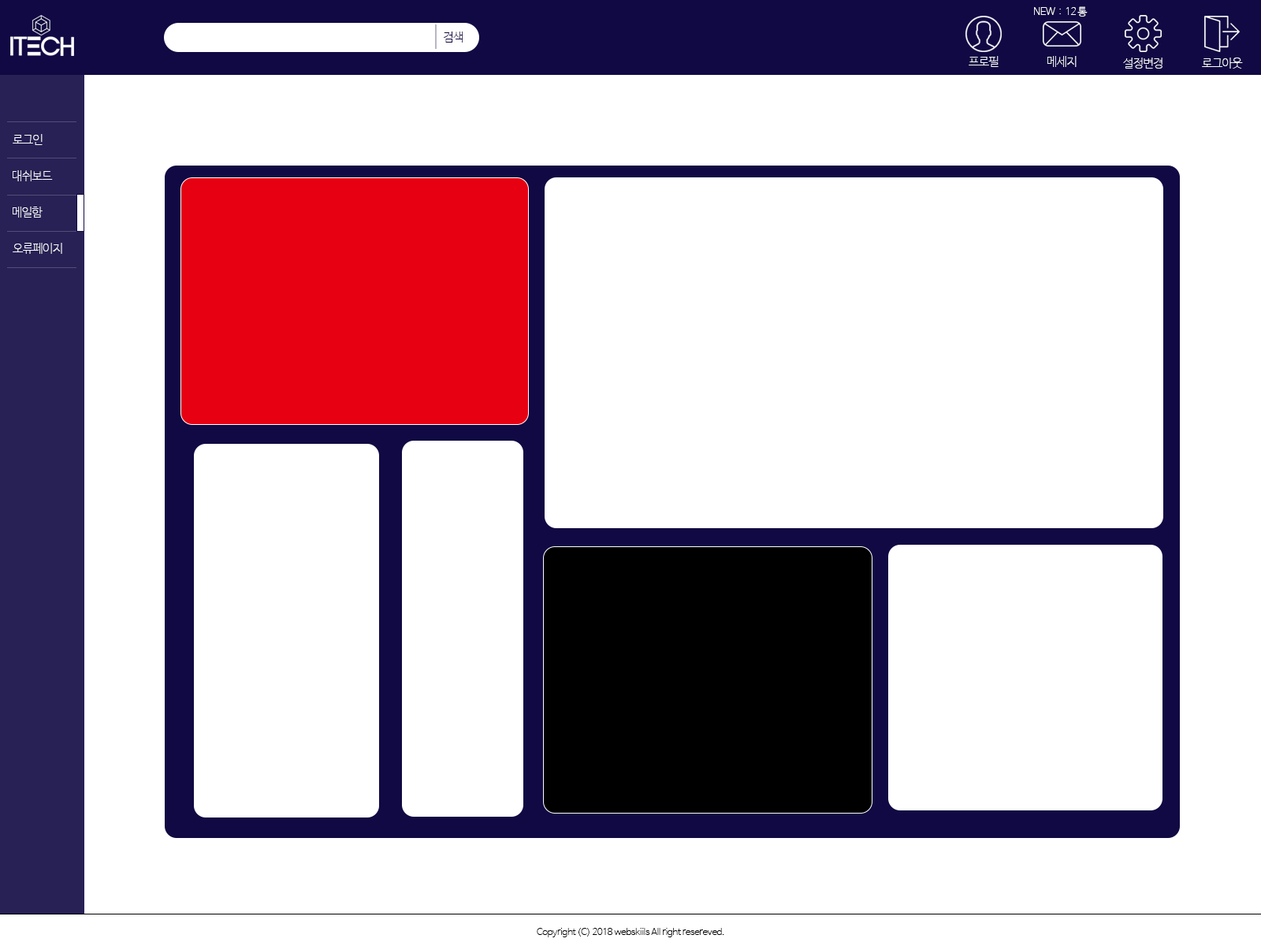
<style>
.page{position:relative;width:1261px;height:946px;background:#ffffff}
.page>*{position:absolute;margin:0}
.t1{font:10.2px "NanumBarunGothicUltraLight";letter-spacing:-0.045em;color:#ffffff}
.t2{font:11.8px "NanumBarunGothicUltraLight";letter-spacing:-0.045em;color:#100943}
.t3{font:11.8px "NanumBarunGothicUltraLight";letter-spacing:-0.045em;color:#ffffff}
.t4{font:9.5px "NanumBarunGothicUltraLight";letter-spacing:-0.045em;color:#000000}
</style>
<div class="page">
<p class="t1" style="left:1034px;top:6px;width:54px;height:11px">NEW  :  12 통</p>
<p class="t2" style="left:444px;top:32px;width:19px;height:11px">검색</p>
<p class="t3" style="left:969px;top:56px;width:29px;height:11px">프로필</p>
<p class="t3" style="left:1047px;top:56px;width:30px;height:11px">메세지</p>
<p class="t3" style="left:1123px;top:58px;width:39px;height:11px">설정변경</p>
<p class="t3" style="left:1202px;top:58px;width:41px;height:11px">로그아웃</p>
<p class="t3" style="left:13px;top:134px;width:30px;height:11px">로그인</p>
<p class="t3" style="left:13px;top:170px;width:40px;height:11px">대쉬보드</p>
<p class="t3" style="left:13px;top:206px;width:30px;height:12px">메일함</p>
<p class="t3" style="left:13px;top:243px;width:49px;height:11px">오류페이지</p>
<p class="t4" style="left:537px;top:928px;width:187px;height:9px">Copyright (C) 2018 webskiils All right resereved.</p>
</div>
